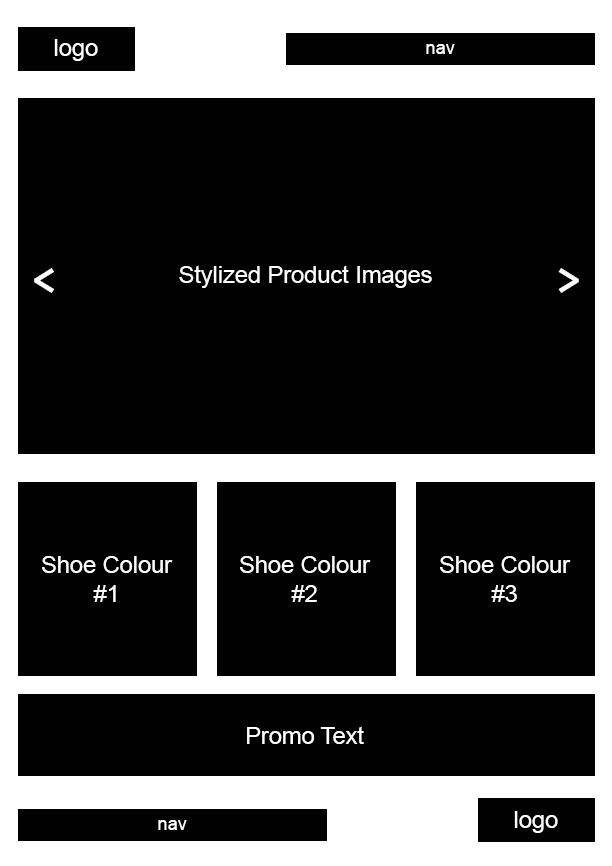
<style>
.page{position:relative;width:612px;height:866px;background:#000000}
.page>*{position:absolute;margin:0}
.t1{font:23.5px "ArialMT";color:#ffffff}
.t2{font:18.2px "ArialMT";color:#ffffff}
.t3{font:54.7px "ABeeZee-Regular";color:#ffffff}
</style>
<div class="page">
<p class="t1" style="left:54px;top:39px;width:44px;height:22px">logo</p>
<p class="t2" style="left:426px;top:44px;width:29px;height:10px">nav</p>
<p class="t3" style="left:34px;top:268px;width:20px;height:25px">&lt;</p>
<p class="t1" style="left:179px;top:265px;width:253px;height:23px">Stylized Product Images</p>
<p class="t3" style="left:558px;top:268px;width:21px;height:25px">&gt;</p>
<p class="t1" style="left:42px;top:556px;width:131px;height:46px;text-align:center">Shoe Colour<br>#1</p>
<p class="t1" style="left:240px;top:556px;width:131px;height:46px;text-align:center">Shoe Colour<br>#2</p>
<p class="t1" style="left:440px;top:556px;width:131px;height:46px;text-align:center">Shoe Colour<br>#3</p>
<p class="t1" style="left:247px;top:726px;width:117px;height:18px">Promo Text</p>
<p class="t2" style="left:158px;top:820px;width:29px;height:10px">nav</p>
<p class="t1" style="left:514px;top:811px;width:44px;height:22px">logo</p>
</div>
